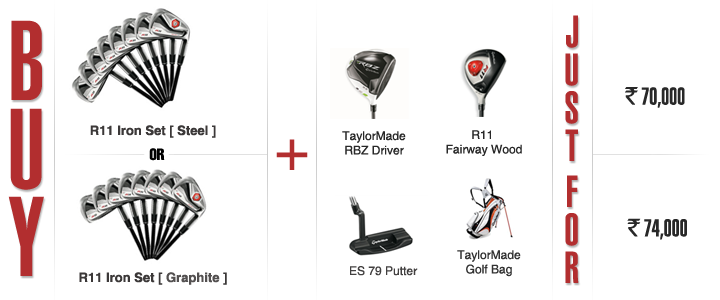
<style>
.page{position:relative;width:720px;height:300px;background:#ffffff}
.page>*{position:absolute;margin:0}
.t1{font:44px/38px "HelveticaLT-UltraCompressed";color:#b22e2f}
.t2{font:111.2px/88px "HelveticaLT-UltraCompressed";color:#b22e2f}
.t3{font:24px "HelveticaLT-UltraCompressed";color:#282828}
.t4{font:24px "RupeeForadian";color:#282828}
.t5{font:13px "HelveticaLTStd-Bold";color:#3b3838}
.t6{font:12px "HelveticaLTStd-Roman";color:#282828}
.t7{font:16px "HelveticaLT-Compressed";color:#000000}
.t8{font:60px "HelveticaLTStd-Roman";color:#b22e2f}
.t9{font:12px "HelveticaLTStd-Roman";color:#323232}
.t10{font:12px "HelveticaLTStd-Roman";color:#424040}
.t11{font:13px "HelveticaLTStd-Bold";color:#535050}
</style>
<div class="page">
<p class="t1" style="left:565px;top:15px;width:13px;height:146px;text-align:center">J<br>U<br>S<br>T</p>
<p class="t2" style="left:8px;top:20px;width:36px;height:256px;text-align:center">B<br>U<br>Y</p>
<p class="t3" style="left:625px;top:87px;width:60px;height:21px"><span class="t4">`</span> 70,000</p>
<p class="t5" style="left:90px;top:125px;width:126px;height:13px">R11 Iron Set [ Steel ]</p>
<p class="t6" style="left:342px;top:131px;width:64px;height:24px;text-align:center">TaylorMade<br>RBZ Driver</p>
<p class="t6" style="left:446px;top:130px;width:76px;height:26px;text-align:center">R11 <br>Fairway Wood</p>
<p class="t7" style="left:149px;top:148px;width:16px;height:13px">OR</p>
<p class="t8" style="left:276px;top:139px;width:32px;height:31px">+</p>
<p class="t1" style="left:565px;top:175px;width:14px;height:108px;text-align:center">F<br>O<br>R</p>
<p class="t3" style="left:627px;top:218px;width:60px;height:22px"><span class="t4">`</span> 74,000</p>
<p class="t9" style="left:457px;top:250px;width:64px;height:27px;text-align:center">TaylorMade<br>Golf Bag</p>
<p class="t10" style="left:350px;top:266px;width:68px;height:10px">ES 79 Putter</p>
<p class="t5" style="left:79px;top:272px;width:148px;height:13px">R11 Iron Set [ <span class="t11">Graphite </span>]</p>
</div>
